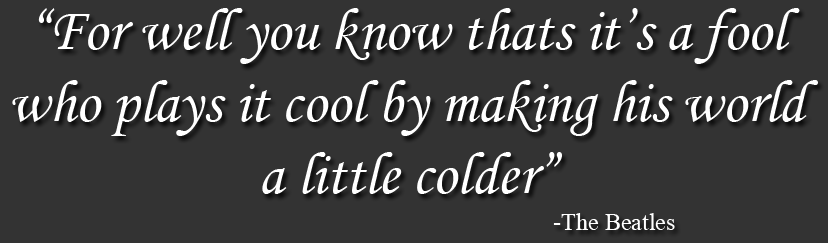
<style>
.page{position:relative;width:828px;height:243px;background:#333333}
.page>*{position:absolute;margin:0}
.t1{font:60px "MonotypeCorsiva";color:#ffffff}
.t2{font:60px "MicrosoftHimalaya";color:#ffffff}
.t3{font:36px "MicrosoftHimalaya";color:#ffffff}
</style>
<div class="page">
<p class="t1" style="left:12px;top:8px;width:806px;height:186px"><span class="t2">  </span>“For well you know thats it’s a fool <br>who plays it cool by making his world <br>                   a little colder”</p>
<p class="t3" style="left:553px;top:213px;width:122px;height:17px">-The Beatles</p>
</div>
